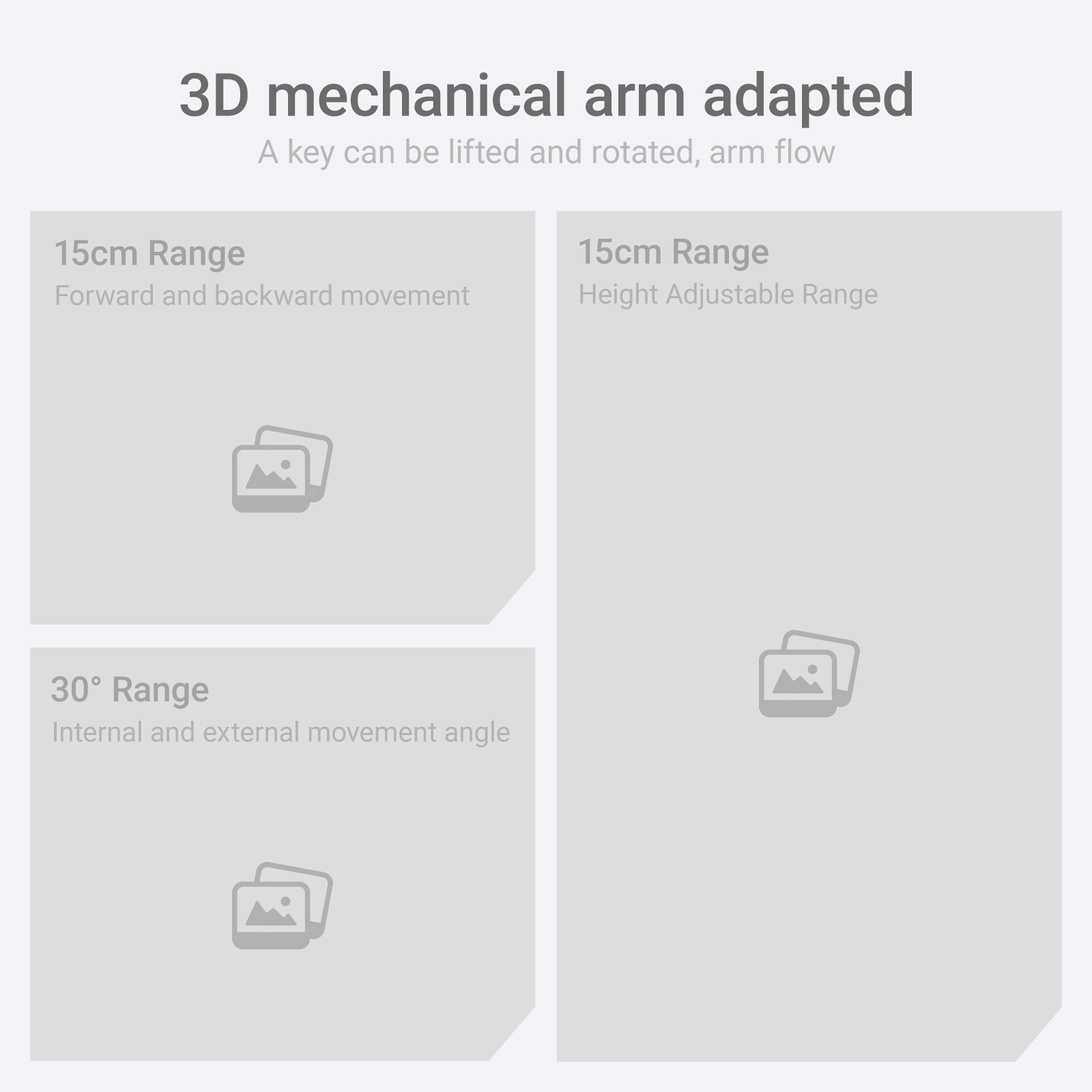
<style>
.page{position:relative;width:1092px;height:1092px;background:#dcdddf}
.page>*{position:absolute;margin:0}
.t1{font:59.7px "Roboto-Medium";color:#6c6c6c}
.t2{font:32.8px "Roboto-Regular";color:#a3a3a3}
.t3{font:34.9px "Roboto-Medium";color:#a3a3a3}
.t4{font:27.7px "Roboto-Regular";color:#a3a3a3}
</style>
<div class="page">
<p class="t1" style="left:180px;top:71px;width:732px;height:57px">3D mechanical arm adapted</p>
<p class="t2" style="left:257px;top:138px;width:578px;height:33px;opacity:0.75">A key can be lifted and rotated, arm flow</p>
<p class="t3" style="left:55px;top:240px;width:190px;height:32px">15cm Range</p>
<p class="t3" style="left:579px;top:238px;width:189px;height:33px">15cm Range</p>
<p class="t4" style="left:56px;top:284px;width:414px;height:22px;opacity:0.75">Forward and backward movement</p>
<p class="t4" style="left:580px;top:283px;width:298px;height:27px;opacity:0.75">Height Adjustable Range</p>
<p class="t3" style="left:51px;top:676px;width:158px;height:33px">30° Range</p>
<p class="t4" style="left:54px;top:721px;width:456px;height:26px;opacity:0.75">Internal and external movement angle</p>
</div>
